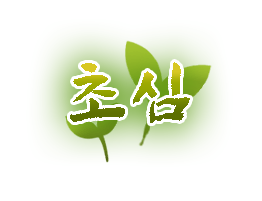
<style>
.page{position:relative;width:262px;height:201px;background:#ffffff}
.page>*{position:absolute;margin:0}
.t1{font:70.7px "SangSangRockOTF";letter-spacing:0.08em;scale:1.08 1}
</style>
<div class="page">
<p class="t1" style="left:70px;top:62px;width:120px;height:61px">초심</p>
</div>
